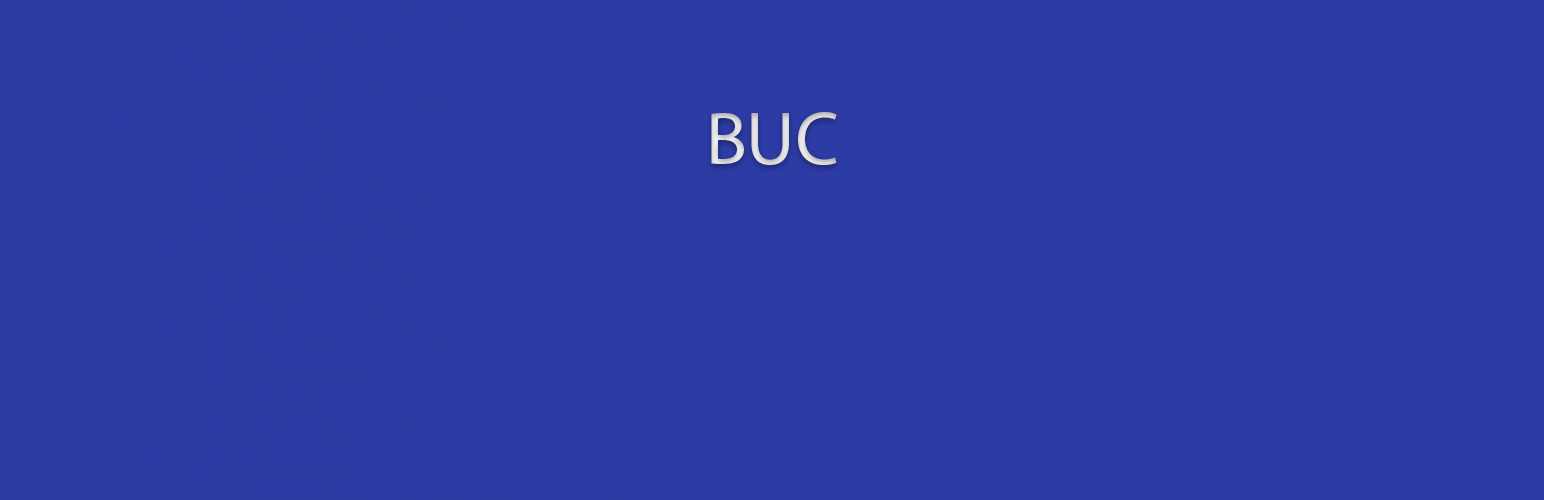
<style>
.page{position:relative;width:1544px;height:500px;background:#2d3ba5}
.page>*{position:absolute;margin:0}
.t1{font:75px "MyriadPro-Regular";color:#dddddd}
</style>
<div class="page">
<p class="t1" style="left:711px;top:112px;width:126px;height:53px">BUC</p>
</div>
